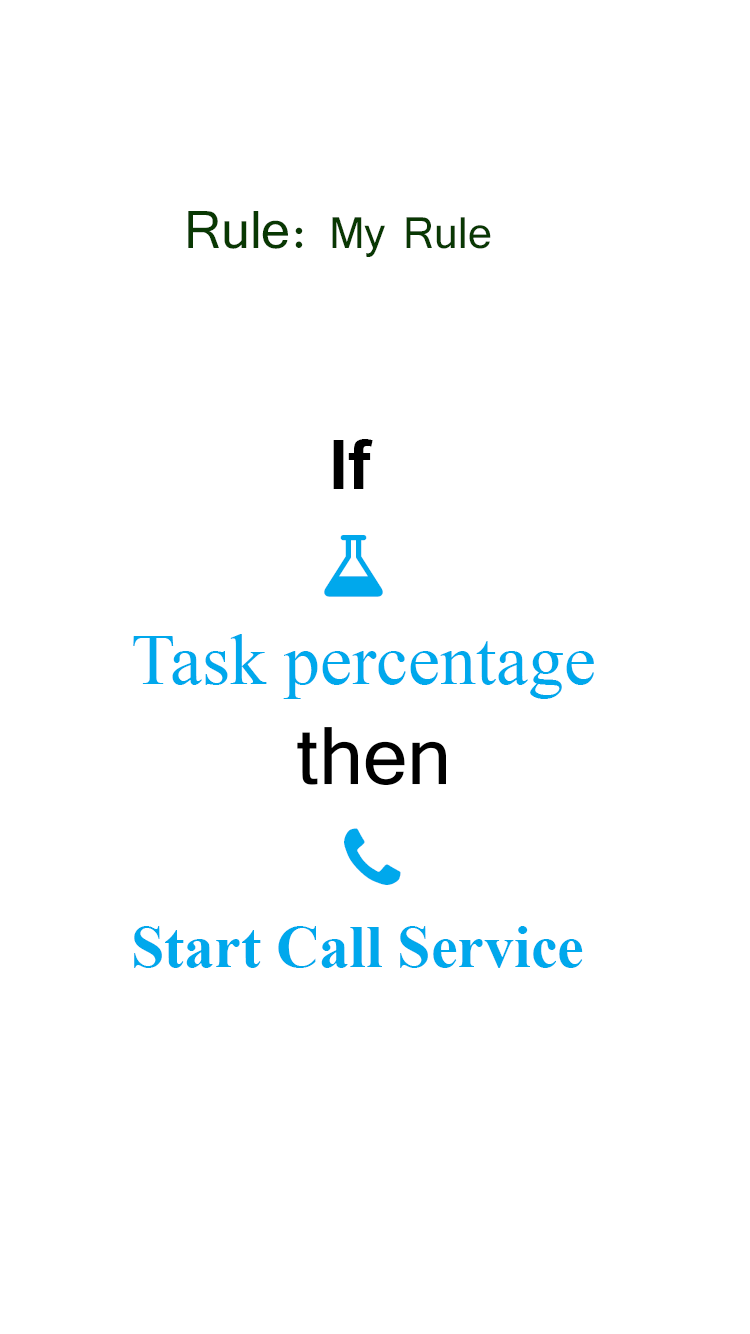
<style>
.page{position:relative;width:750px;height:1334px;background:#ffffff}
.page>*{position:absolute;margin:0}
.t1{font:55.1px "Tunga";color:#093803}
.t2{font:66.2px "Tunga";color:#093803}
.t3{font:67.7px "Arial-BoldMT";color:#000000}
.t4{font:72px "TimesNewRomanPSMT";color:#00a8ec}
.t5{font:101.6px "Tunga";color:#000000}
.t6{font:60px "TimesNewRomanPS-BoldMT";color:#00a8ec}
</style>
<div class="page">
<p class="t1" style="left:188px;top:211px;width:303px;height:46px"><span class="t2"> Rule: </span>My Rule</p>
<p class="t3" style="left:333px;top:439px;width:40px;height:50px">If</p>
<p class="t4" style="left:133px;top:634px;width:461px;height:65px">Task percentage</p>
<p class="t5" style="left:297px;top:727px;width:149px;height:58px">then</p>
<p class="t6" style="left:134px;top:926px;width:449px;height:42px">Start Call Service</p>
</div>
